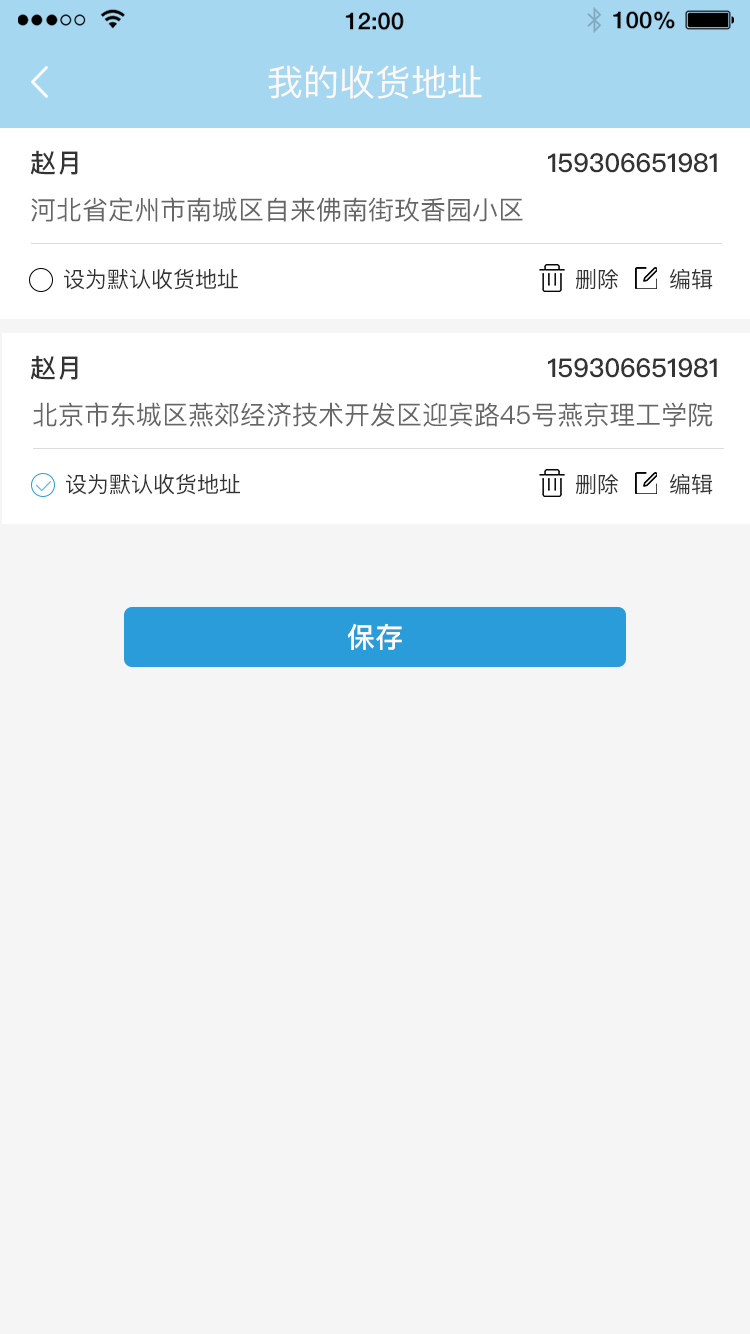
<style>
.page{position:relative;width:750px;height:1334px;background:#f5f5f5}
.page>*{position:absolute;margin:0}
.t1{font:36px "PingFangSC-Regular";color:#fdf9f9}
.t2{font:26px "PingFangSC-Medium";color:#333333}
.t3{font:26px "PingFangSC-Regular";color:#666666}
.t4{font:22px "PingFangSC-Regular";color:#333333}
.t5{font:28px "PingFangSC-Medium";color:#ffffff}
</style>
<div class="page">
<p class="t1" style="left:268px;top:65px;width:214px;height:34px">我的收货地址</p>
<p class="t2" style="left:30px;top:150px;width:48px;height:25px">赵月</p>
<p class="t2" style="left:548px;top:153px;width:169px;height:20px">159306651981</p>
<p class="t3" style="left:31px;top:197px;width:492px;height:25px">河北省定州市南城区自来佛南街玫香园小区</p>
<p class="t4" style="left:64px;top:269px;width:174px;height:21px">设为默认收货地址</p>
<p class="t4" style="left:576px;top:269px;width:43px;height:21px">删除</p>
<p class="t4" style="left:670px;top:269px;width:43px;height:21px">编辑</p>
<p class="t2" style="left:30px;top:355px;width:48px;height:25px">赵月</p>
<p class="t2" style="left:548px;top:358px;width:169px;height:20px">159306651981</p>
<p class="t3" style="left:33px;top:402px;width:680px;height:25px">北京市东城区燕郊经济技术开发区迎宾路45号燕京理工学院</p>
<p class="t4" style="left:66px;top:474px;width:174px;height:21px">设为默认收货地址</p>
<p class="t4" style="left:576px;top:474px;width:43px;height:21px">删除</p>
<p class="t4" style="left:670px;top:474px;width:43px;height:21px">编辑</p>
<p class="t5" style="left:347px;top:623px;width:55px;height:27px">保存</p>
</div>
